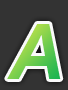
<style>
.page{position:relative;width:68px;height:90px;background:#333333}
.page>*{position:absolute;margin:0}
.t1{font:77px "ProductSans-BoldItalic";letter-spacing:-0.22em}
</style>
<div class="page">
<p class="t1" style="left:7px;top:24px;width:54px;height:55px">A</p>
</div>
